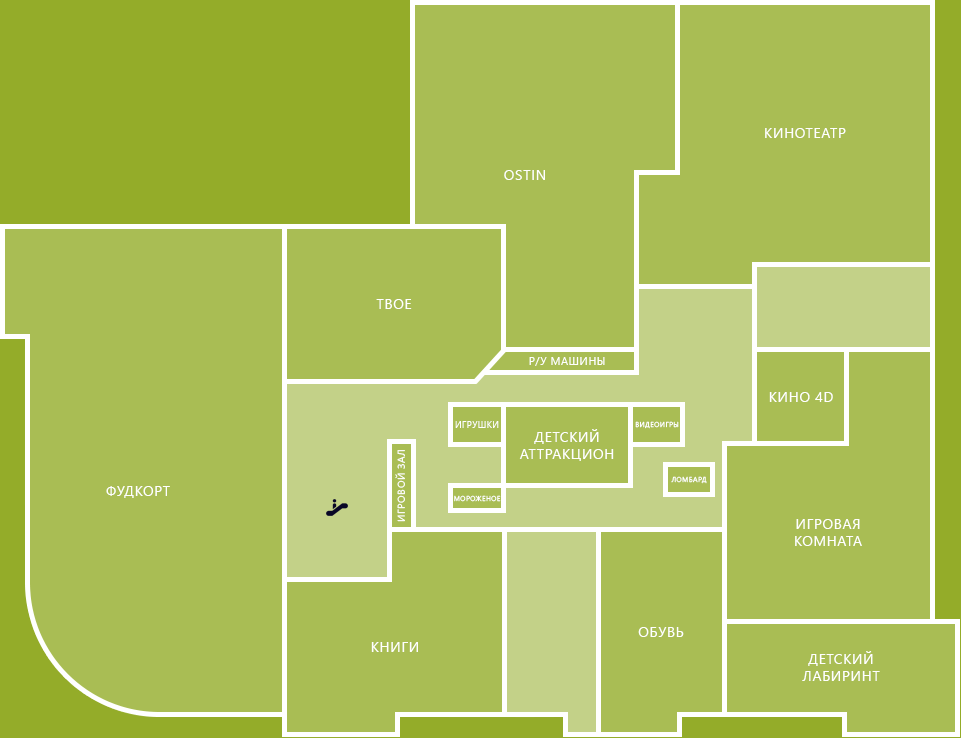
<style>
.page{position:relative;width:961px;height:738px;background:#a9bd54}
.page>*{position:absolute;margin:0}
.t1{font:14px "SegoeUI";letter-spacing:0.05em;color:#ffffff;text-transform:uppercase}
.t2{font:11px "SegoeUI";letter-spacing:0.05em;color:#ffffff;text-transform:uppercase}
.t3{font:9px "SegoeUI";letter-spacing:0.05em;color:#ffffff;text-transform:uppercase}
.t4{font:7px "SegoeUI";letter-spacing:0.05em;color:#ffffff;text-transform:uppercase}
.t5{font:10px "SegoeUI";letter-spacing:0.05em;color:#ffffff;text-transform:uppercase}
</style>
<div class="page">
<p class="t1" style="left:765px;top:128px;width:81px;height:10px">Кинотеатр</p>
<p class="t1" style="left:504px;top:170px;width:41px;height:10px">Ostin</p>
<p class="t1" style="left:376px;top:299px;width:36px;height:10px">Твое</p>
<p class="t2" style="left:529px;top:357px;width:76px;height:9px">р/у машины</p>
<p class="t1" style="left:769px;top:392px;width:64px;height:10px">Кино 4D</p>
<p class="t3" style="left:455px;top:421px;width:44px;height:7px">Игрушки</p>
<p class="t4" style="left:635px;top:421px;width:44px;height:8px">Видеоигры</p>
<p class="t1" style="left:519px;top:429px;width:95px;height:32px;text-align:center">Детский<br>аттракцион</p>
<p class="t5" style="left:395px;top:450px;width:10px;height:72px;rotate:-90deg">Игровой зал</p>
<p class="t1" style="left:106px;top:486px;width:64px;height:12px">Фудкорт</p>
<p class="t4" style="left:671px;top:476px;width:36px;height:8px">Ломбард</p>
<p class="t4" style="left:454px;top:495px;width:47px;height:7px">Мороженое</p>
<p class="t1" style="left:795px;top:519px;width:67px;height:27px;text-align:center">Игровая<br>комната</p>
<p class="t1" style="left:638px;top:627px;width:46px;height:10px">Обувь</p>
<p class="t1" style="left:371px;top:642px;width:47px;height:10px">Книги</p>
<p class="t1" style="left:802px;top:651px;width:78px;height:30px;text-align:center">Детский<br>лабиринт</p>
</div>
